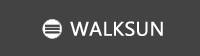
<style>
.page{position:relative;width:200px;height:56px;background:#434343}
.page>*{position:absolute;margin:0}
.t1{font:19.8px "SegoeUI";color:#ffffff;font-weight:bold}
</style>
<div class="page">
<p class="t1" style="left:70px;top:21px;width:93px;height:15px">WALKSUN</p>
</div>
